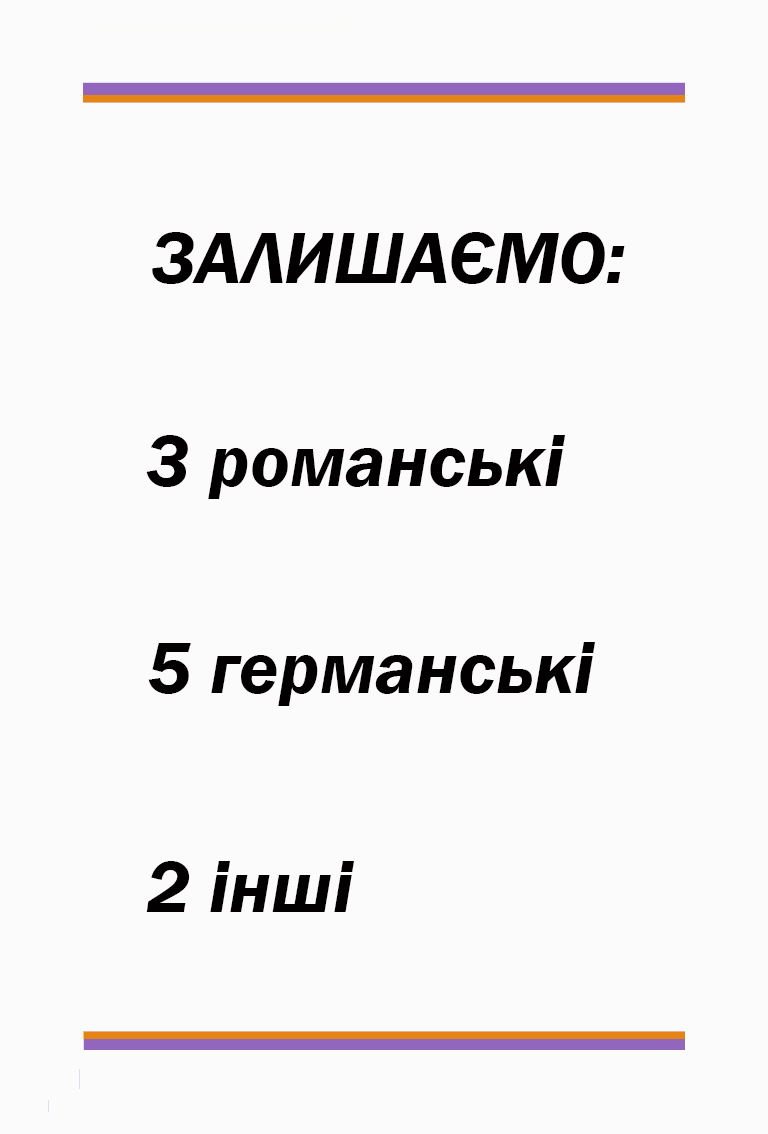
<style>
.page{position:relative;width:768px;height:1134px;background:#fbfbfb}
.page>*{position:absolute;margin:0}
.t1{font:75px "FranklinGothic-DemiItalic";color:#020000}
</style>
<div class="page">
<p class="t1" style="left:152px;top:232px;width:473px;height:52px">ЗАЛИШАЄМО:</p>
<p class="t1" style="left:146px;top:435px;width:419px;height:64px">3 романські</p>
<p class="t1" style="left:148px;top:642px;width:447px;height:64px">5 германські</p>
<p class="t1" style="left:146px;top:861px;width:208px;height:51px">2 інші</p>
</div>
